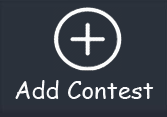
<style>
.page{position:relative;width:167px;height:117px;background:#2a313b}
.page>*{position:absolute;margin:0}
.t1{font:24px "ComicSansMS";color:#fafafb}
</style>
<div class="page">
<p class="t1" style="left:15px;top:80px;width:139px;height:19px">Add Contest</p>
</div>
